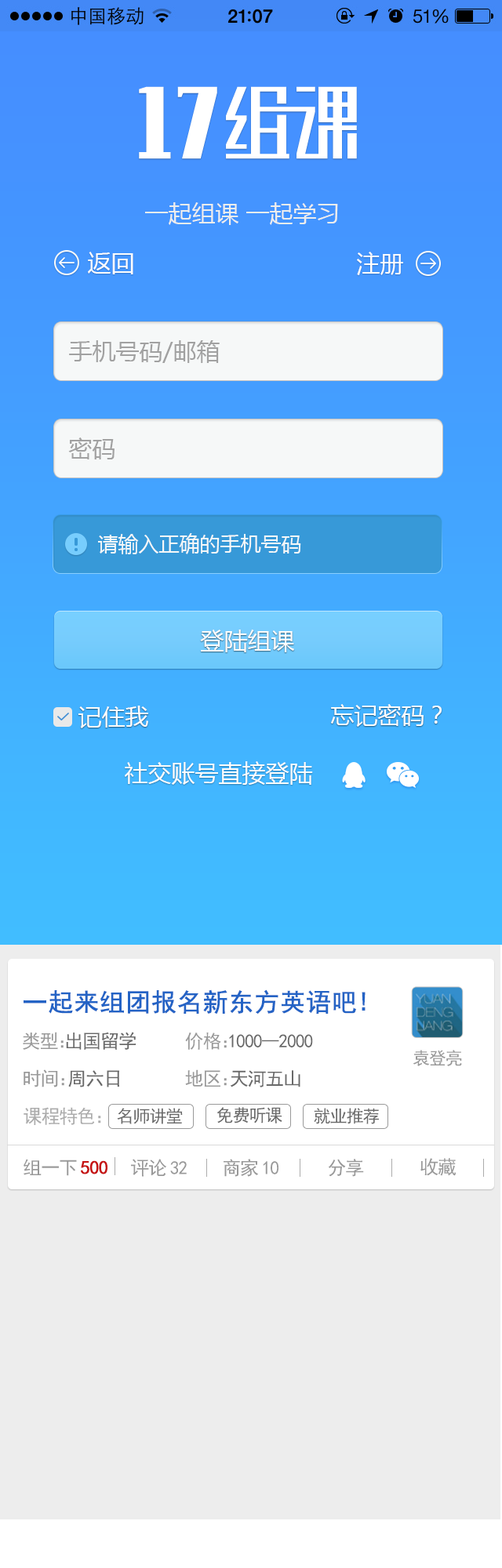
<style>
.page{position:relative;width:502px;height:1568px;background:#ededed}
.page>*{position:absolute;margin:0}
.t1{font:23.5px "MicrosoftYaHei";color:#ededed}
.t2{font:23.5px "MicrosoftYaHei";color:#fefefe}
.t3{font:23.5px "MicrosoftYaHei";color:#a1a1a1}
.t4{font:20.4px "MicrosoftYaHei";color:#f6f8f8}
.t5{font:25.1px "SimHei";color:#2463c5;font-weight:bold}
.t6{font:18.8px "SimHei";letter-spacing:-0.05em;color:#696969}
.t7{font:18.8px "SimHei";letter-spacing:-0.05em;color:#999999}
.t8{font:18.8px "SimHei";letter-spacing:-0.62em;color:#999999}
.t9{font:17.2px "SimHei";letter-spacing:-0.05em;color:#999999}
.t10{font:18.8px "SimHei";letter-spacing:-0.5em;color:#999999}
.t11{font:18.8px "SimHei";letter-spacing:-0.52em;color:#999999}
.t12{font:18.8px "SimHei";letter-spacing:-0.05em;color:#acacac}
.t13{font:18.8px "SimHei";color:#acacac}
.t14{font:17.2px "SimHei";letter-spacing:-0.05em;color:#696969}
.t15{font:18.8px "SimHei";letter-spacing:-0.05em;color:#c61414;font-weight:bold}
.t16{font:18.8px "SimHei";letter-spacing:0.15em;color:#999999}
</style>
<div class="page">
<p class="t1" style="left:145px;top:202px;width:193px;height:23px">一起组课 一起学习</p>
<p class="t2" style="left:88px;top:252px;width:45px;height:22px">返回</p>
<p class="t2" style="left:357px;top:252px;width:46px;height:23px">注册</p>
<p class="t3" style="left:69px;top:340px;width:151px;height:23px">手机号码/邮箱</p>
<p class="t3" style="left:68px;top:437px;width:46px;height:22px">密码</p>
<p class="t4" style="left:98px;top:533px;width:203px;height:21px">请输入正确的手机号码</p>
<p class="t2" style="left:200px;top:630px;width:94px;height:22px">登陆组课</p>
<p class="t2" style="left:78px;top:706px;width:70px;height:22px">记住我</p>
<p class="t2" style="left:331px;top:704px;width:110px;height:23px">忘记密码？</p>
<p class="t2" style="left:125px;top:761px;width:188px;height:24px">社交账号直接登陆</p>
<p class="t5" style="left:24px;top:989px;width:341px;height:25px">一起来组团报名新东方英语吧!</p>
<p class="t6" style="left:23px;top:1032px;width:113px;height:18px"><span class="t7">类型</span><span class="t8">：</span>出国留学</p>
<p class="t6" style="left:185px;top:1032px;width:128px;height:18px"><span class="t7">价格</span><span class="t8">：</span>1000--2000</p>
<p class="t9" style="left:412px;top:1050px;width:50px;height:16px">袁登亮</p>
<p class="t6" style="left:24px;top:1069px;width:95px;height:18px"><span class="t7">时间</span><span class="t10">：</span>周六日</p>
<p class="t6" style="left:185px;top:1069px;width:115px;height:18px"><span class="t7">地区</span><span class="t11">：</span>天河五山</p>
<p class="t12" style="left:24px;top:1107px;width:77px;height:18px">课程特色<span class="t13">：</span></p>
<p class="t14" style="left:117px;top:1108px;width:66px;height:16px">名师讲堂</p>
<p class="t14" style="left:216px;top:1107px;width:66px;height:16px">免费听课</p>
<p class="t14" style="left:314px;top:1108px;width:65px;height:16px">就业推荐</p>
<p class="t7" style="left:420px;top:1158px;width:36px;height:18px">收藏</p>
<p class="t15" style="left:24px;top:1159px;width:83px;height:17px"><span class="t7">组一</span><span class="t16">下</span>500</p>
<p class="t7" style="left:131px;top:1159px;width:56px;height:18px">评<span class="t16">论</span>32</p>
<p class="t7" style="left:223px;top:1159px;width:55px;height:18px">商<span class="t16">家</span>10</p>
<p class="t7" style="left:328px;top:1159px;width:36px;height:18px">分享</p>
</div>
